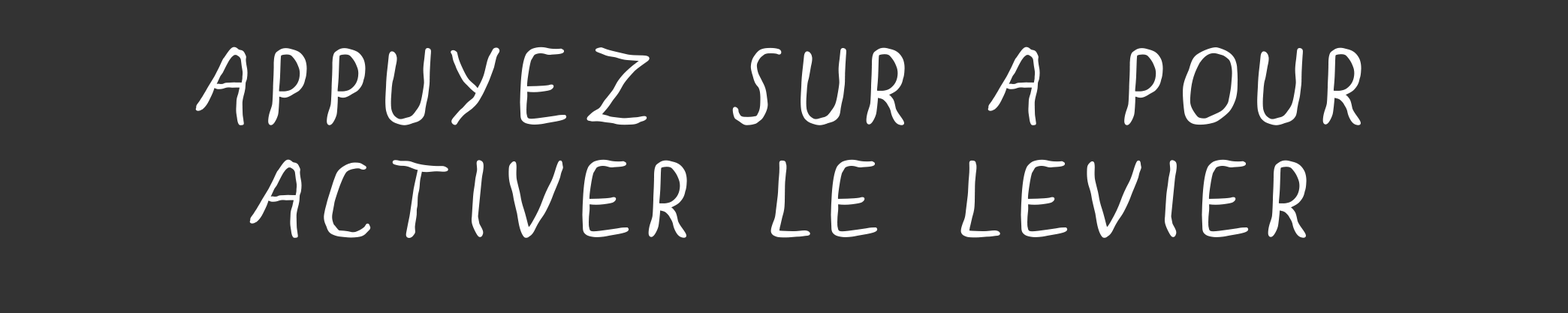
<style>
.page{position:relative;width:1568px;height:313px;background:#333333}
.page>*{position:absolute;margin:0}
.t1{font:93.9px "GLOO";letter-spacing:0.01em;color:#ffffff;font-weight:bold}
</style>
<div class="page">
<p class="t1" style="left:195px;top:47px;width:1166px;height:191px;text-align:center">APPUYEZ SUR A POUR <br>ACTIVER LE LEVIER</p>
</div>
